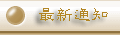
<style>
.page{position:relative;width:120px;height:35px}
.page>*{position:absolute;margin:0}
.t1{font:18px "FZLBFW--GB1-0";color:#b28524}
</style>
<div class="page">
<p class="t1" style="left:39px;top:8px;width:69px;height:13px">最新通知</p>
</div>
